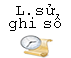
<style>
.page{position:relative;width:71px;height:58px;background:#ffffff}
.page>*{position:absolute;margin:0}
.t1{font:12px/13.3px "CourierNewPSMT";color:#000000}
</style>
<div class="page">
<p class="t1" style="left:9px;top:4px;width:52px;height:27px;text-align:center">L.sử<br>ghi sổ</p>
</div>
